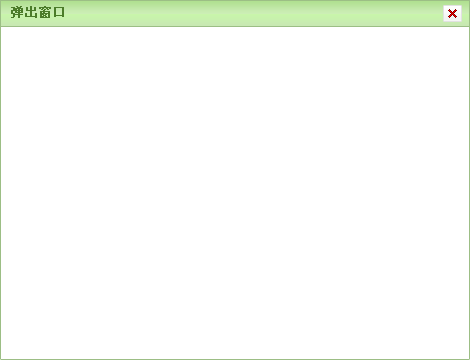
<style>
.page{position:relative;width:470px;height:360px;background:#ffffff}
.page>*{position:absolute;margin:0}
.t1{font:13px "SimSun";color:#4b7c29;font-weight:bold}
</style>
<div class="page">
<p class="t1" style="left:11px;top:6px;width:53px;height:12px">弹出窗口</p>
</div>
